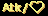
<style>
.page{position:relative;width:48px;height:16px;background:#000000}
.page>*{position:absolute;margin:0}
.t1{font:11px "Meiryo";color:#f0f080;font-weight:bold}
.t2{font:12px "SegoeUIEmoji";color:#f0f080;font-weight:bold}
</style>
<div class="page">
<p class="t1" style="left:2px;top:1px;width:42px;height:12px">Atk/<span class="t2">❤</span></p>
</div>
